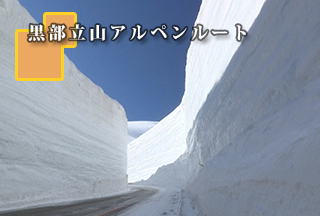
<style>
.page{position:relative;width:320px;height:216px}
.page>*{position:absolute;margin:0}
.t1{font:17px "KozMinPr6N-Heavy";letter-spacing:0.2em;color:#ffffff}
</style>
<div class="page">
<p class="t1" style="left:28px;top:24px;width:218px;height:17px">黒部立山アルペンルート</p>
</div>
